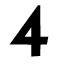
<style>
.page{position:relative;width:64px;height:64px;background:#ffffff}
.page>*{position:absolute;margin:0}
.t1{font:66.7px "(ÇÑ)°¢¸Ó¸®D";color:#000000}
</style>
<div class="page">
<p class="t1" style="left:9px;top:5px;width:40px;height:52px">4</p>
</div>
